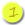
<style>
.page{position:relative;width:25px;height:25px;background:#ebff40}
.page>*{position:absolute;margin:0}
.t1{font:15px "SegoePrint";color:#b8ad00}
</style>
<div class="page">
<p class="t1" style="left:8px;top:7px;width:11px;height:10px">1</p>
</div>
